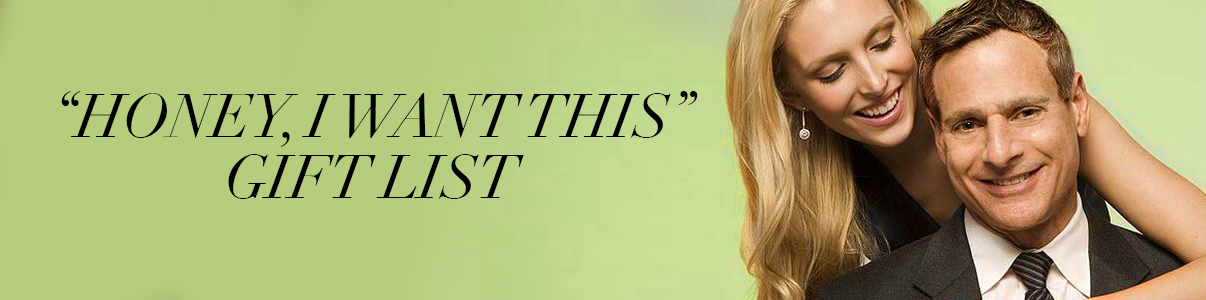
<style>
.page{position:relative;width:1206px;height:300px;background:#b5cd7d}
.page>*{position:absolute;margin:0}
.t1{font:60.6px/60.6px "Didot-Italic";letter-spacing:-0.02em;color:#000000}
</style>
<div class="page">
<p class="t1" style="left:61px;top:91px;width:637px;height:108px;text-align:center">“HONEY, I WANT THIS” GIFT LIST</p>
</div>
